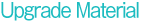
<style>
.page{position:relative;width:142px;height:21px;background:#ffffff}
.page>*{position:absolute;margin:0}
.t1{font:20px "GothicMB101Pro-Regular";letter-spacing:-0.06em;color:#1dbcc0;scale:0.9 1}
</style>
<div class="page">
<p class="t1" style="left:1px;top:2px;width:138px;height:19px">Upgrade Material</p>
</div>
